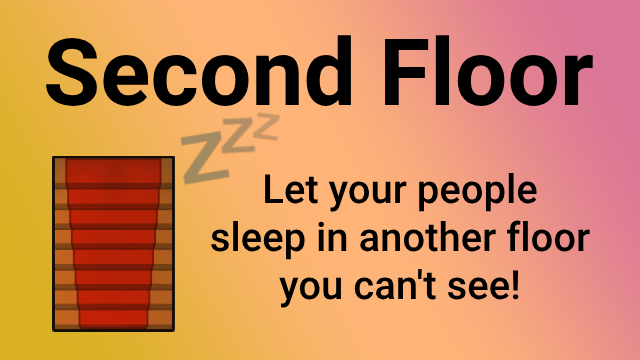
<style>
.page{position:relative;width:640px;height:360px}
.page>*{position:absolute;margin:0}
.t1{font:93px "Roboto-Bold";color:#000000}
.t2{font:40px "Roboto-Medium";color:#000000}
</style>
<div class="page">
<p class="t1" style="left:46px;top:35px;width:547px;height:71px">Second Floor</p>
<p class="t2" style="left:211px;top:173px;width:379px;height:135px;text-align:center">Let your people<br>sleep in another floor<br>you can't see!</p>
</div>
